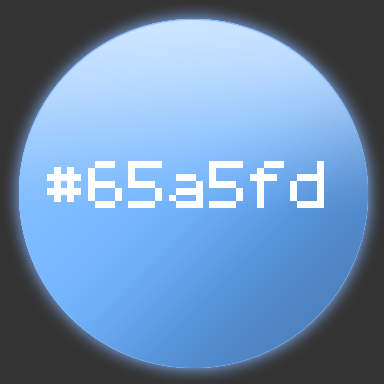
<style>
.page{position:relative;width:384px;height:384px;background:#333333}
.page>*{position:absolute;margin:0}
.t1{font:54px "Fixedv01";color:#ffffff}
</style>
<div class="page">
<p class="t1" style="left:47px;top:161px;width:277px;height:47px">#65a5fd</p>
</div>
